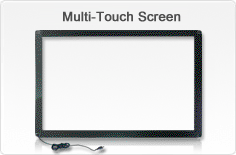
<style>
.page{position:relative;width:236px;height:155px}
.page>*{position:absolute;margin:0}
.t1{font:13px "ArialMT";color:#4e4e4e;font-weight:bold}
</style>
<div class="page">
<p class="t1" style="left:63px;top:11px;width:118px;height:11px">Multi-Touch Screen</p>
</div>
